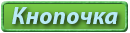
<style>
.page{position:relative;width:130px;height:33px}
.page>*{position:absolute;margin:0}
.t1{font:24px "MyriadPro-BoldIt";color:#b9eaf4}
</style>
<div class="page">
<p class="t1" style="left:12px;top:7px;width:106px;height:17px">Кнопочка</p>
</div>
